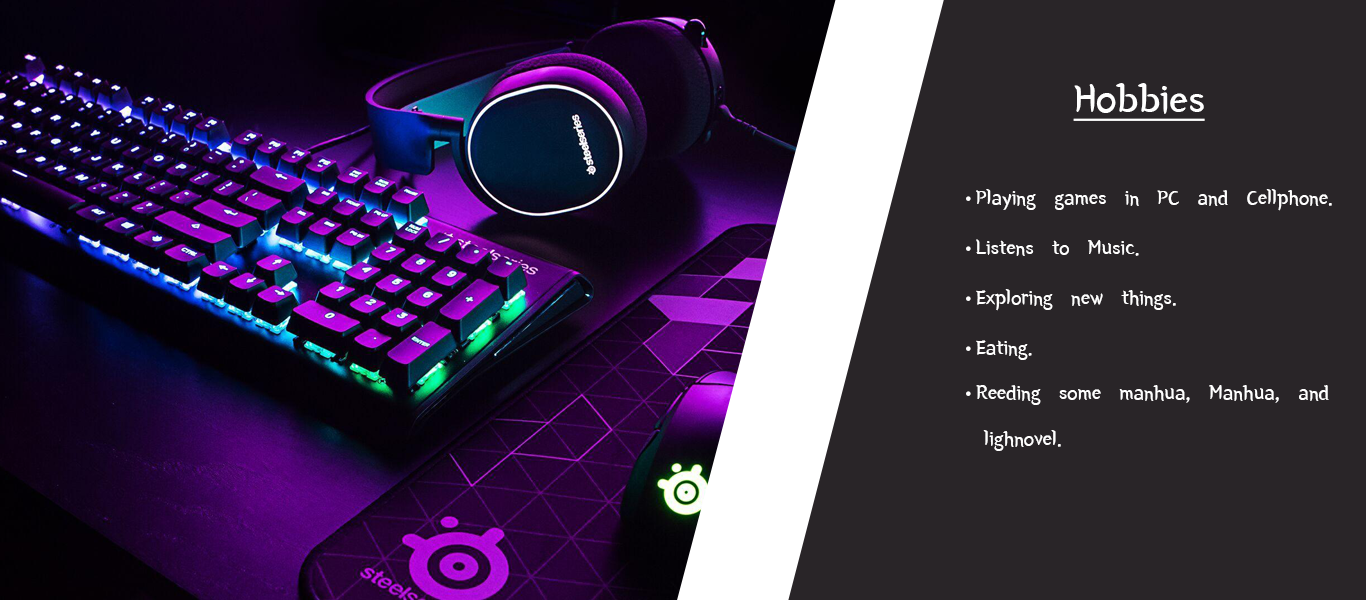
<style>
.page{position:relative;width:1366px;height:600px;background:#292528}
.page>*{position:absolute;margin:0}
.t1{font:41.7px "YeonSung-Regular";color:#ffffff;text-decoration:underline}
.t2{font:20.8px/45.8px "YeonSung-Regular";color:#ffffff}
.t3{font:20.8px/50px "MyriadPro-Regular";color:#ffffff}
.t4{font:20.8px/50px "YeonSung-Regular";color:#ffffff}
.t5{font:20.8px/45.8px "MyriadPro-Regular";color:#ffffff}
</style>
<div class="page">
<p class="t1" style="left:1073px;top:83px;width:132px;height:38px">Hobbies</p>
<p class="t2" style="left:966px;top:189px;width:366px;height:262px"><span class="t3">• </span><span class="t4">Playing games in PC and Cellphone.<br></span><span class="t3">• </span><span class="t4">Listens to Music.<br></span><span class="t3">• </span><span class="t4">Exploring new things.<br></span><span class="t3">• </span><span class="t4">Eating.<br></span><span class="t5">• </span>Reeding some manhua, Manhua, and <br> lighnovel.</p>
</div>
